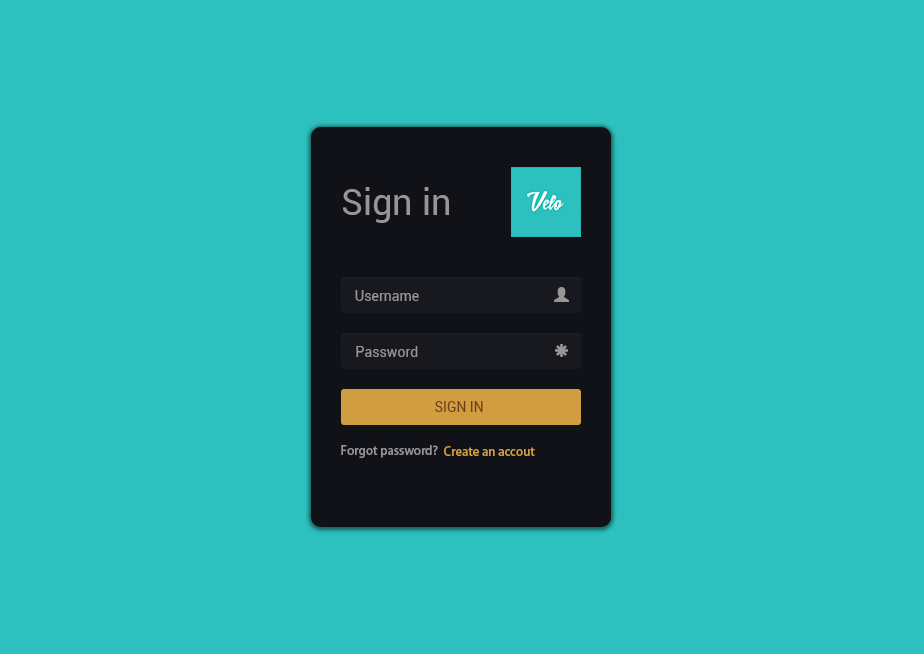
<style>
.page{position:relative;width:924px;height:654px;background:#2cc0be}
.page>*{position:absolute;margin:0}
.t1{font:36px "Roboto-Regular";color:#979696}
.t2{font:14px "Roboto-Regular";color:#979696}
.t3{font:14px "Roboto-Regular";color:#6c411b}
.t4{font:12px "AdobeHeitiStd-Regular";color:#979696}
.t5{font:12px "AdobeHeitiStd-Regular";color:#d29d41}
</style>
<div class="page">
<p class="t1" style="left:343px;top:187px;width:106px;height:36px">Sign in</p>
<p class="t2" style="left:355px;top:290px;width:64px;height:11px">Username</p>
<p class="t2" style="left:356px;top:346px;width:62px;height:11px">Password</p>
<p class="t3" style="left:435px;top:401px;width:48px;height:11px">SIGN IN</p>
<p class="t4" style="left:341px;top:445px;width:97px;height:13px">Forgot password?</p>
<p class="t5" style="left:444px;top:446px;width:91px;height:10px">Create an accout</p>
</div>
